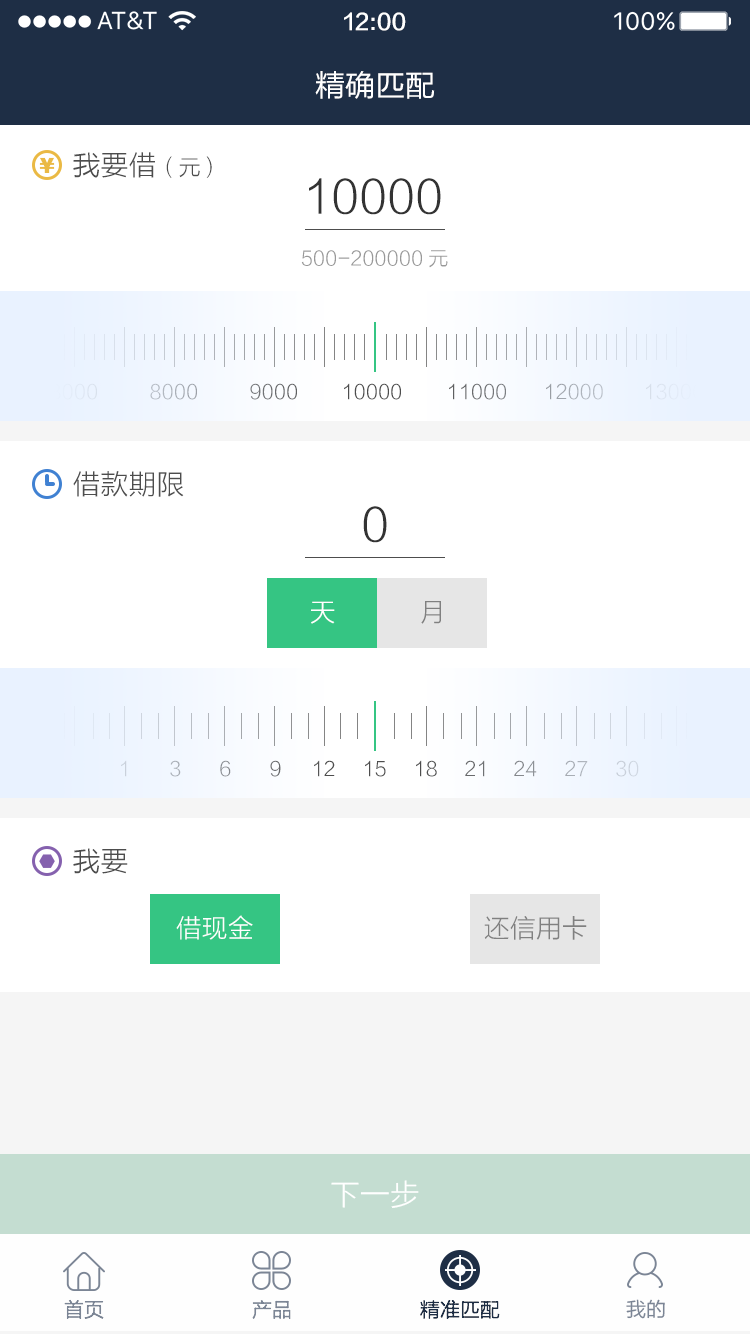
<style>
.page{position:relative;width:750px;height:1334px;background:#ffffff}
.page>*{position:absolute;margin:0}
.t1{font:22px "FZLTZHK--GBK1-0";color:#ffffff}
.t2{font:30px "FZLTHJW--GB1-0";color:#ffffff}
.t3{font:21px "FZCCHK--GBK1-0";color:#eab945}
.t4{font:28px "FZLTXHK";color:#4d4d4d}
.t5{font:22px "FZLTXHK";color:#4d4d4d}
.t6{font:46px "FZLTXHK";color:#333333}
.t7{font:20px "FZLTXHK";color:#999999}
.t8{font:20px "FZLTXHK";color:#e2ebf7}
.t9{font:20px "FZLTXHK";color:#abb1b9}
.t10{font:20px "FZLTXHK";color:#6c6e71}
.t11{font:20px "FZLTXHK";color:#4d4d4d}
.t12{font:20px "FZLTXHK";color:#6d6f71}
.t13{font:20px "FZLTXHK";color:#a6abb2}
.t14{font:20px "FZLTXHK";color:#dfe8f4}
.t15{font:26px "FZLTXHK";color:#ffffff}
.t16{font:26px "FZLTXHK";color:#808080}
.t17{font:20px "FZLTXHK";color:#cad1db}
.t18{font:20px "FZLTXHK";color:#a8adb5}
.t19{font:20px "FZLTXHK";color:#86898e}
.t20{font:20px "FZLTXHK";color:#68696c}
.t21{font:20px "FZLTXHK";color:#696b6d}
.t22{font:20px "FZLTXHK";color:#888b90}
.t23{font:20px "FZLTXHK";color:#a9aeb6}
.t24{font:20px "FZLTXHK";color:#ccd3dd}
.t25{font:30px "FZLTXHK";color:#ffffff}
.t26{font:20px "FZLTXHK";color:#7b8595}
.t27{font:20px "FZLTXHK";color:#1e2e45}
.t28{font:20px "FZLTHK--GBK1-0";color:#7b8595}
</style>
<div class="page">
<p class="t1" style="left:344px;top:12px;width:62px;height:19px">12:00</p>
<p class="t2" style="left:315px;top:71px;width:120px;height:28px">精确匹配</p>
<p class="t3" style="left:39px;top:157px;width:16px;height:16px">￥</p>
<p class="t4" style="left:73px;top:152px;width:139px;height:26px">我要借<span class="t5">（元）</span></p>
<p class="t6" style="left:309px;top:178px;width:132px;height:37px">10000</p>
<p class="t7" style="left:301px;top:250px;width:147px;height:18px">500-200000元</p>
<p class="t8" style="left:50px;top:383px;width:47px;height:17px">8000</p>
<p class="t9" style="left:150px;top:383px;width:47px;height:17px">8000</p>
<p class="t10" style="left:250px;top:383px;width:47px;height:17px">9000</p>
<p class="t11" style="left:344px;top:383px;width:57px;height:17px">10000</p>
<p class="t12" style="left:449px;top:383px;width:57px;height:17px">11000</p>
<p class="t13" style="left:546px;top:383px;width:57px;height:17px">12000</p>
<p class="t14" style="left:646px;top:383px;width:57px;height:17px">13000</p>
<p class="t4" style="left:73px;top:471px;width:111px;height:26px">借款期限</p>
<p class="t6" style="left:363px;top:506px;width:24px;height:37px">0</p>
<p class="t15" style="left:311px;top:601px;width:24px;height:23px">天</p>
<p class="t16" style="left:421px;top:601px;width:20px;height:23px">月</p>
<p class="t17" style="left:121px;top:760px;width:6px;height:17px">1</p>
<p class="t18" style="left:170px;top:760px;width:11px;height:17px">3</p>
<p class="t19" style="left:220px;top:760px;width:11px;height:17px">6</p>
<p class="t20" style="left:270px;top:760px;width:11px;height:17px">9</p>
<p class="t11" style="left:314px;top:760px;width:21px;height:17px">12</p>
<p class="t11" style="left:365px;top:760px;width:21px;height:17px">15</p>
<p class="t11" style="left:416px;top:760px;width:21px;height:17px">18</p>
<p class="t21" style="left:465px;top:760px;width:20px;height:17px">21</p>
<p class="t22" style="left:514px;top:760px;width:23px;height:17px">24</p>
<p class="t23" style="left:565px;top:760px;width:23px;height:17px">27</p>
<p class="t24" style="left:616px;top:760px;width:23px;height:17px">30</p>
<p class="t4" style="left:73px;top:848px;width:55px;height:26px">我要</p>
<p class="t15" style="left:176px;top:915px;width:77px;height:25px">借现金</p>
<p class="t16" style="left:484px;top:916px;width:103px;height:24px">还信用卡</p>
<p class="t25" style="left:331px;top:1180px;width:88px;height:28px">下一步</p>
<p class="t26" style="left:64px;top:1299px;width:40px;height:20px">首页</p>
<p class="t26" style="left:252px;top:1300px;width:39px;height:19px">产品</p>
<p class="t27" style="left:420px;top:1300px;width:80px;height:19px">精准匹配</p>
<p class="t28" style="left:626px;top:1299px;width:39px;height:20px">我的</p>
</div>
